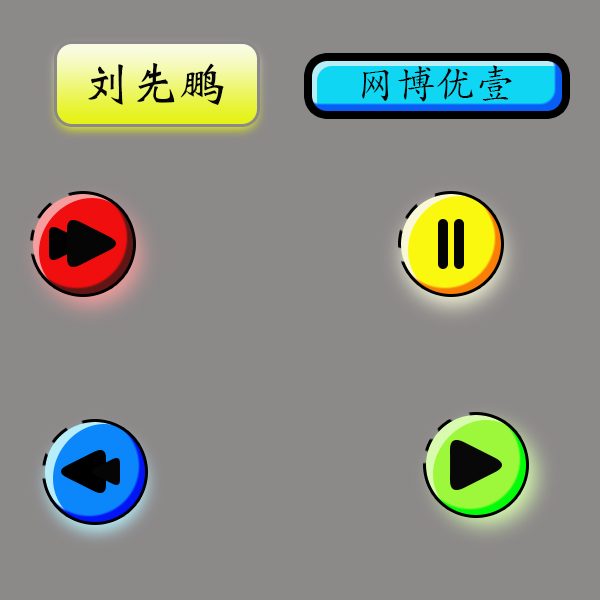
<style>
.page{position:relative;width:600px;height:600px;background:#8c8989}
.page>*{position:absolute;margin:0}
.t1{font:48px "Weibei-SC-Bold";color:#050505}
.t2{font:40px "STKaiti";color:#050505}
</style>
<div class="page">
<p class="t1" style="left:88px;top:63px;width:136px;height:42px">刘先鹏</p>
<p class="t2" style="left:362px;top:65px;width:150px;height:37px">网博优壹</p>
</div>
